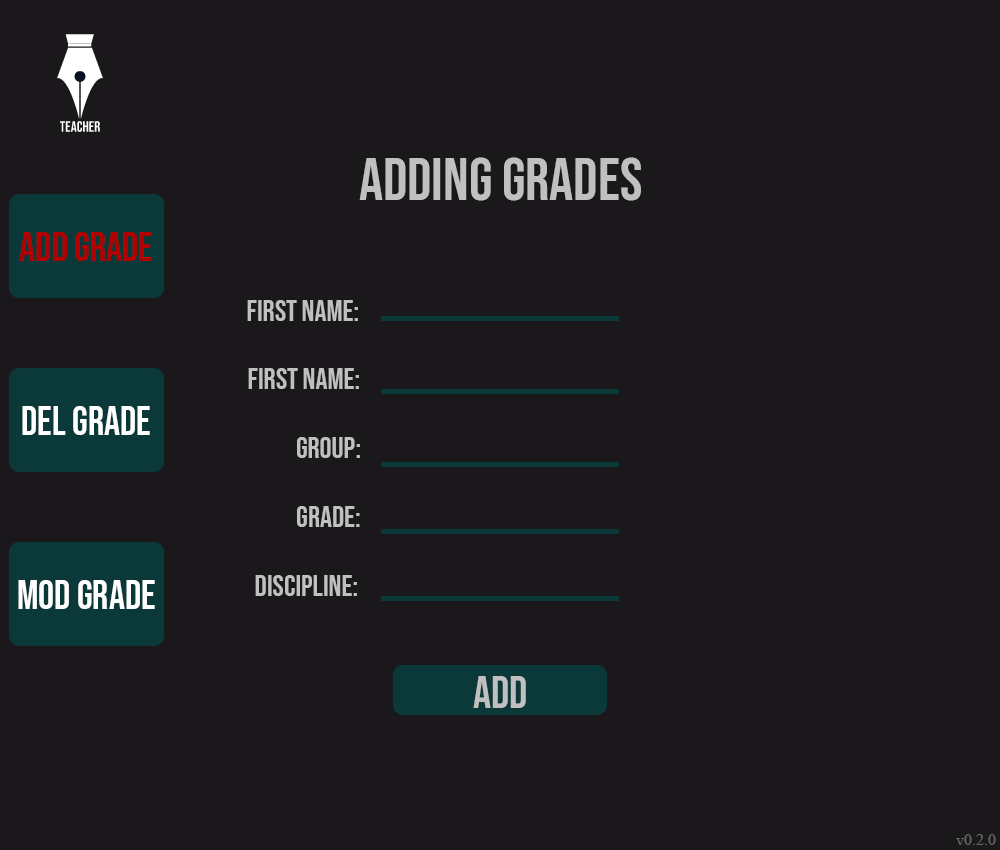
<style>
.page{position:relative;width:1000px;height:850px;background:#1a181b}
.page>*{position:absolute;margin:0}
.t1{font:60px "BebasNeue-Regular";color:#c0c0c0}
.t2{font:40px "BebasNeue-Regular";color:#b00000}
.t3{font:30px "BebasNeue-Regular";color:#c0c0c0}
.t4{font:40px "BebasNeue-Regular";color:#ffffff}
.t5{font:45px "BebasNeue-Regular";color:#c0c0c0}
.t6{font:16px "TimesNewRomanPSMT";color:#666666}
</style>
<div class="page">
<p class="t1" style="left:359px;top:157px;width:282px;height:44px">ADDING GRADES</p>
<p class="t2" style="left:19px;top:232px;width:133px;height:29px">ADD GRADE</p>
<p class="t3" style="left:247px;top:300px;width:111px;height:21px">First NAME:</p>
<p class="t3" style="left:248px;top:368px;width:111px;height:21px">First NAME:</p>
<p class="t4" style="left:22px;top:406px;width:128px;height:29px">del GRADE</p>
<p class="t3" style="left:297px;top:437px;width:63px;height:21px">Group:</p>
<p class="t3" style="left:297px;top:506px;width:63px;height:21px">GRADE:</p>
<p class="t4" style="left:18px;top:580px;width:137px;height:29px">mod GRADE</p>
<p class="t3" style="left:255px;top:575px;width:102px;height:21px">DISCIPLINE:</p>
<p class="t5" style="left:473px;top:676px;width:53px;height:32px">add</p>
<p class="t6" style="left:956px;top:834px;width:40px;height:11px">v0.2.0</p>
</div>
